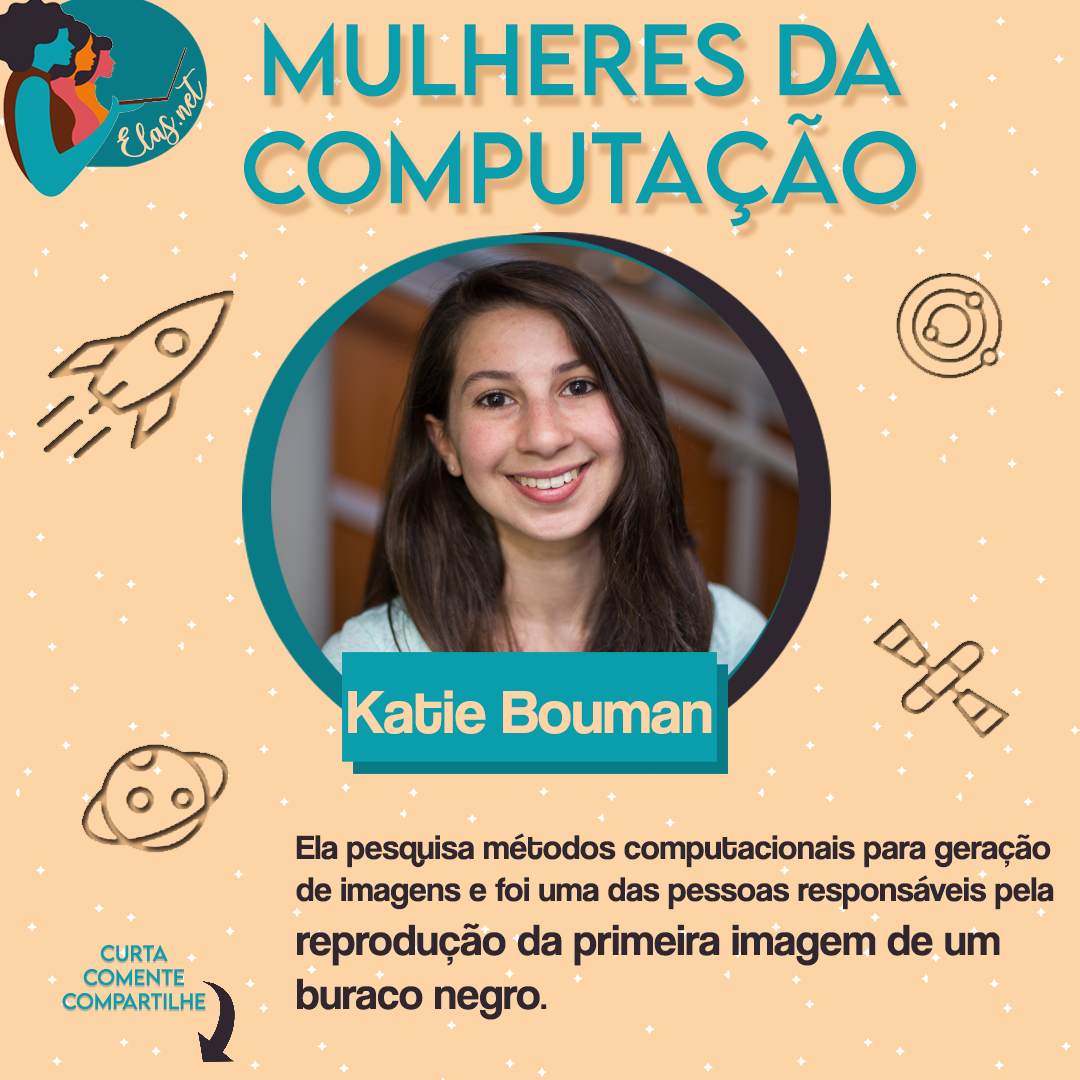
<style>
.page{position:relative;width:1080px;height:1080px;background:#fcd4a5}
.page>*{position:absolute;margin:0}
.t1{font:90px "LEMONMILK-Regular";color:#0a9eac}
.t2{font:25px "charlinda-Regular";color:#fcd4a5;scale:1.18 1}
.t3{font:63px "CoolveticaRg-Regular";color:#fcd4a5}
.t4{font:35px "CoolveticaRg-Regular";color:#2f262f}
.t5{font:45px "CoolveticaRg-Regular";color:#2f262f}
.t6{font:20px "LEMONMILK-Regular"}
.t7{font:20px "LEMONMILK-Regular";color:#0a9eac}
</style>
<div class="page">
<p class="t1" style="left:244px;top:22px;width:672px;height:205px;text-align:center">Mulheres da<br>Computação</p>
<p class="t2" style="left:117px;top:68px;width:86px;height:89px;rotate:-43deg">Elas.net</p>
<p class="t3" style="left:348px;top:690px;width:364px;height:44px">Katie Bouman</p>
<p class="t4" style="left:296px;top:833px;width:758px;height:187px">Ela pesquisa métodos computacionais para geração <br>de imagens e foi uma das pessoas responsáveis pela <br><span class="t5">reprodução da primeira imagem de um <br>buraco negro</span>.</p>
<p class="t6" style="left:62px;top:946px;width:144px;height:66px;text-align:center">Curta<br>Comente<br>Compartilhe</p>
<p class="t7" style="left:62px;top:944px;width:144px;height:66px;text-align:center">Curta<br>Comente<br>Compartilhe</p>
</div>
